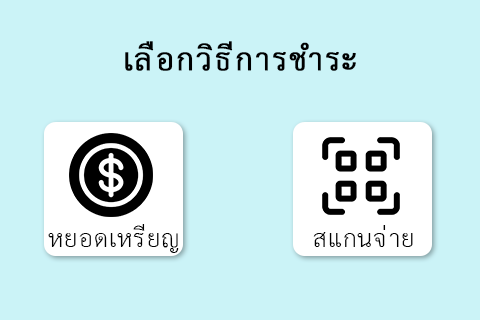
<style>
.page{position:relative;width:480px;height:320px;background:#cbf3f7}
.page>*{position:absolute;margin:0}
.t1{font:44.4px "THSarabunPSK";letter-spacing:0.03em;color:#000000;font-weight:bold}
.t2{font:35.6px "THSarabunPSK";letter-spacing:0.03em;color:#000000}
</style>
<div class="page">
<p class="t1" style="left:125px;top:41px;width:231px;height:30px">เลือกวิธีการชำระ</p>
<p class="t2" style="left:48px;top:224px;width:131px;height:29px">หยอดเหรียญ</p>
<p class="t2" style="left:313px;top:225px;width:100px;height:22px">สแกนจ่าย</p>
</div>
